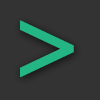
<style>
.page{position:relative;width:100px;height:100px;background:#333333}
.page>*{position:absolute;margin:0}
.t1{font:100.1px "Tahoma";letter-spacing:-0.115em;color:#23b684;font-weight:bold}
</style>
<div class="page">
<p class="t1" style="left:20px;top:20px;width:54px;height:57px">&gt;</p>
</div>
